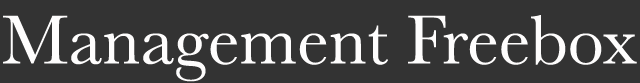
<style>
.page{position:relative;width:640px;height:83px;background:#333333}
.page>*{position:absolute;margin:0}
.t1{font:72px "Baskerville";color:#fefdfd}
</style>
<div class="page">
<p class="t1" style="left:3px;top:15px;width:634px;height:67px">Management Freebox</p>
</div>
